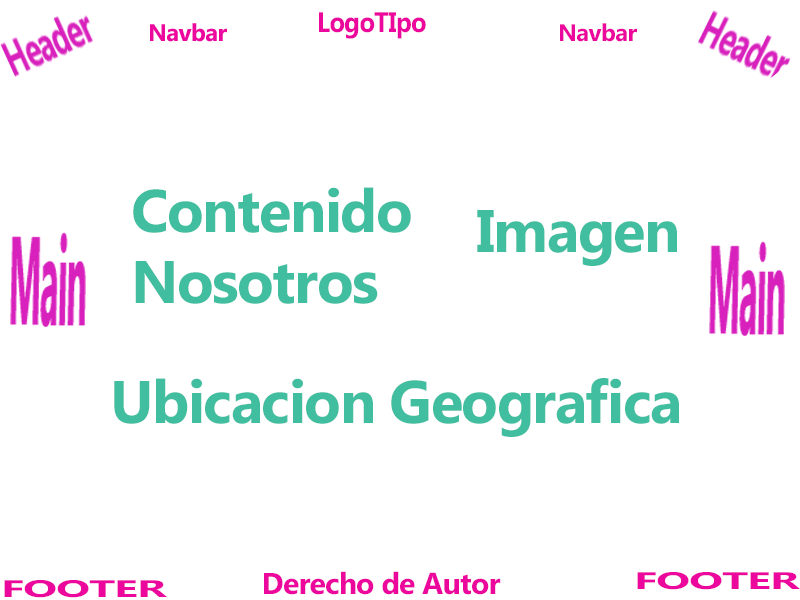
<style>
.page{position:relative;width:800px;height:600px;background:#ffffff}
.page>*{position:absolute;margin:0}
.t1{font:28.3px "Ebrima-Bold";letter-spacing:-0.025em;color:#ec089d;scale:0.9 1}
.t2{font:24px "Ebrima-Bold";letter-spacing:-0.025em;color:#ec089d}
.t3{font:60px/24px "Ebrima-Bold";letter-spacing:-0.025em;color:#41be9f}
.t4{font:60px "Ebrima-Bold";letter-spacing:-0.025em;color:#41be9f}
.t5{font:23.9px "Ebrima-Bold";letter-spacing:-0.025em;color:#ec089d;scale:1.88 1}
.t6{font:30px "Ebrima-Bold";letter-spacing:-0.025em;color:#ec089d}
</style>
<div class="page">
<p class="t1" style="left:319px;top:12px;width:107px;height:27px">LogoTIpo</p>
<p class="t2" style="left:560px;top:23px;width:77px;height:19px">Navbar</p>
<p class="t3" style="left:133px;top:187px;width:278px;height:117px">Contenido<br><br><br>Nosotros</p>
<p class="t4" style="left:477px;top:210px;width:200px;height:56px">Imagen</p>
<p class="t4" style="left:114px;top:378px;width:565px;height:59px">Ubicacion Geografica</p>
<p class="t5" style="left:4px;top:580px;width:163px;height:18px">FOOTER</p>
<p class="t6" style="left:264px;top:571px;width:237px;height:24px">Derecho de Autor</p>
<p class="t5" style="left:637px;top:572px;width:163px;height:18px">FOOTER</p>
</div>
